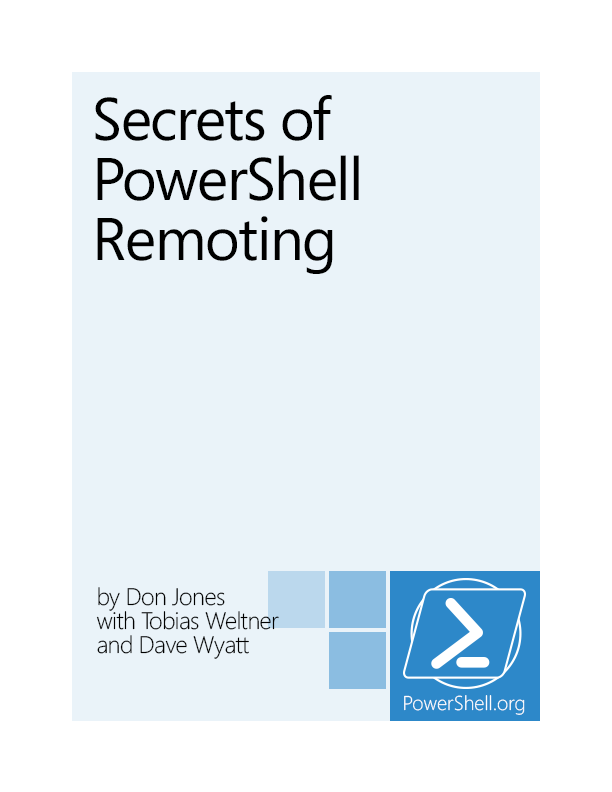
<style>
.page{position:relative;width:612px;height:792px;background:#eaf3f9}
.page>*{position:absolute;margin:0}
.t1{font:60px/60px "Segoe";letter-spacing:-0.025em;color:#000000}
.t2{font:24px/24px "Segoe-Light";letter-spacing:-0.025em;color:#000000}
</style>
<div class="page">
<p class="t1" style="left:95px;top:95px;width:264px;height:179px">Secrets of<br>PowerShell<br>Remoting</p>
<p class="t2" style="left:96px;top:587px;width:183px;height:72px">by Don Jones<br>with Tobias Weltner<br>and Dave Wyatt</p>
</div>
